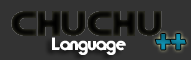
<style>
.page{position:relative;width:191px;height:60px;background:#333333}
.page>*{position:absolute;margin:0}
.t1{font:18px "TypoGraphica";letter-spacing:-0.025em;color:#ffffff}
.t2{font:30px "TypoGraphica";letter-spacing:-0.025em;color:#0e819e}
</style>
<div class="page">
<p class="t1" style="left:52px;top:37px;width:74px;height:18px">Language</p>
<p class="t2" style="left:155px;top:34px;width:31px;height:16px">++</p>
</div>
